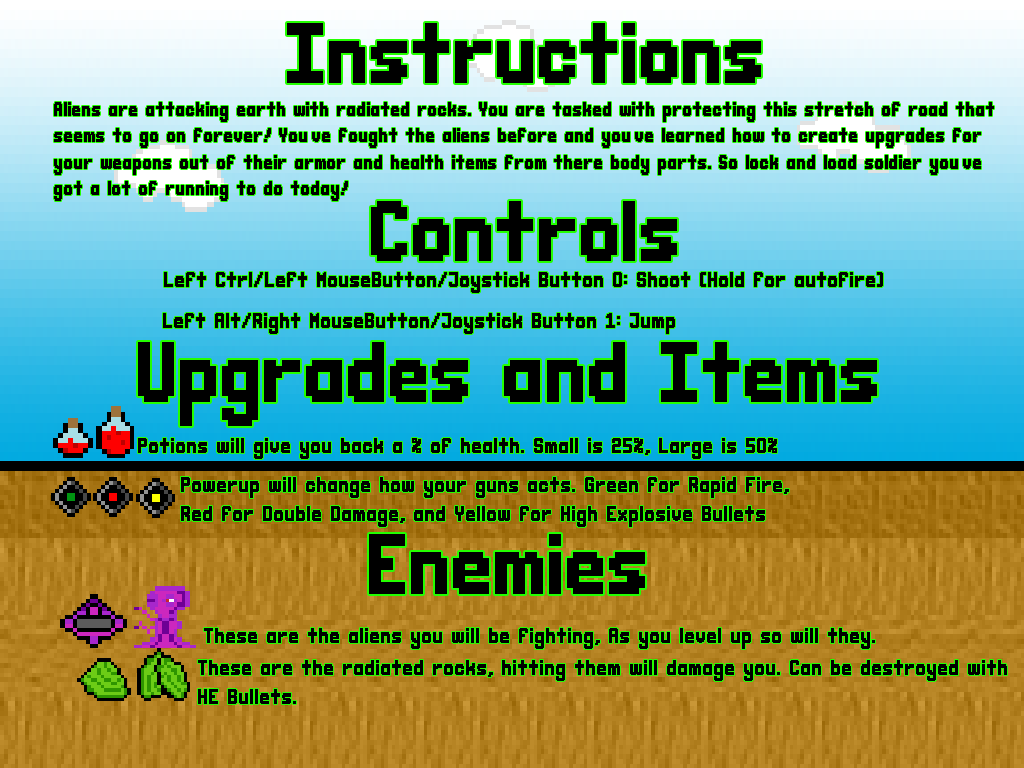
<style>
.page{position:relative;width:1024px;height:768px}
.page>*{position:absolute;margin:0}
.t1{font:48px "CasualEncounter";color:#000000}
.t2{font:11px "CasualEncounter";color:#000000}
.t3{font:12px "CasualEncounter";color:#000000}
</style>
<div class="page">
<p class="t1" style="left:287px;top:23px;width:474px;height:60px">Instructions</p>
<p class="t2" style="left:54px;top:102px;width:940px;height:99px">Aliens are attacking earth with radiated rocks. You are tasked with protecting this stretch of road that<br> <br>seems to go on forever! You’ve fought the aliens before and you’ve learned how to create upgrades for <br><br>your weapons out of their armor and health items from there body parts. So lock and load soldier you’ve <br><br>got a lot of running to do today!</p>
<p class="t1" style="left:371px;top:201px;width:306px;height:60px">Controls</p>
<p class="t3" style="left:164px;top:272px;width:719px;height:21px">Left Ctrl/Left MouseButton/Joystick Button 0: Shoot (Hold for autofire)</p>
<p class="t3" style="left:163px;top:313px;width:512px;height:21px">Left Alt/Right MouseButton/Joystick Button 1: Jump</p>
<p class="t1" style="left:138px;top:342px;width:739px;height:84px">Upgrades and Items</p>
<p class="t3" style="left:138px;top:438px;width:639px;height:21px">Potions will give you back a % of health. Small is 25%, Large is 50%</p>
<p class="t3" style="left:181px;top:477px;width:608px;height:50px">Powerup will change how your guns acts. Green for Rapid Fire, <br><br>Red for Double Damage, and Yellow for High Explosive Bullets</p>
<p class="t1" style="left:369px;top:534px;width:276px;height:60px">Enemies</p>
<p class="t3" style="left:204px;top:628px;width:671px;height:21px">These are the aliens you will be fighting, As you level up so will they.</p>
<p class="t3" style="left:198px;top:660px;width:809px;height:44px">These are the radiated rocks, hitting them will damage you. Can be destroyed with<br><br>HE Bullets.</p>
</div>
